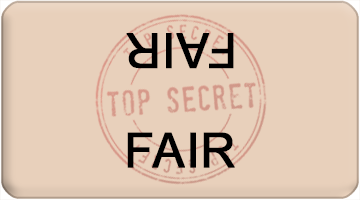
<style>
.page{position:relative;width:360px;height:200px;background:#e8d0bb}
.page>*{position:absolute;margin:0}
.t1{font:48px "ArialMT";color:#000000;font-weight:bold}
</style>
<div class="page">
<p class="t1" style="left:126px;top:33px;width:108px;height:36px;rotate:180deg">FAIR</p>
<p class="t1" style="left:127px;top:132px;width:108px;height:36px">FAIR</p>
</div>
